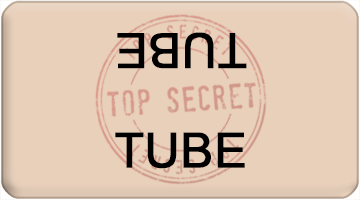
<style>
.page{position:relative;width:360px;height:200px;background:#e8d0bb}
.page>*{position:absolute;margin:0}
.t1{font:48px "ArialMT";color:#000000;font-weight:bold}
</style>
<div class="page">
<p class="t1" style="left:117px;top:32px;width:130px;height:37px;rotate:180deg">TUBE</p>
<p class="t1" style="left:115px;top:132px;width:130px;height:37px">TUBE</p>
</div>
